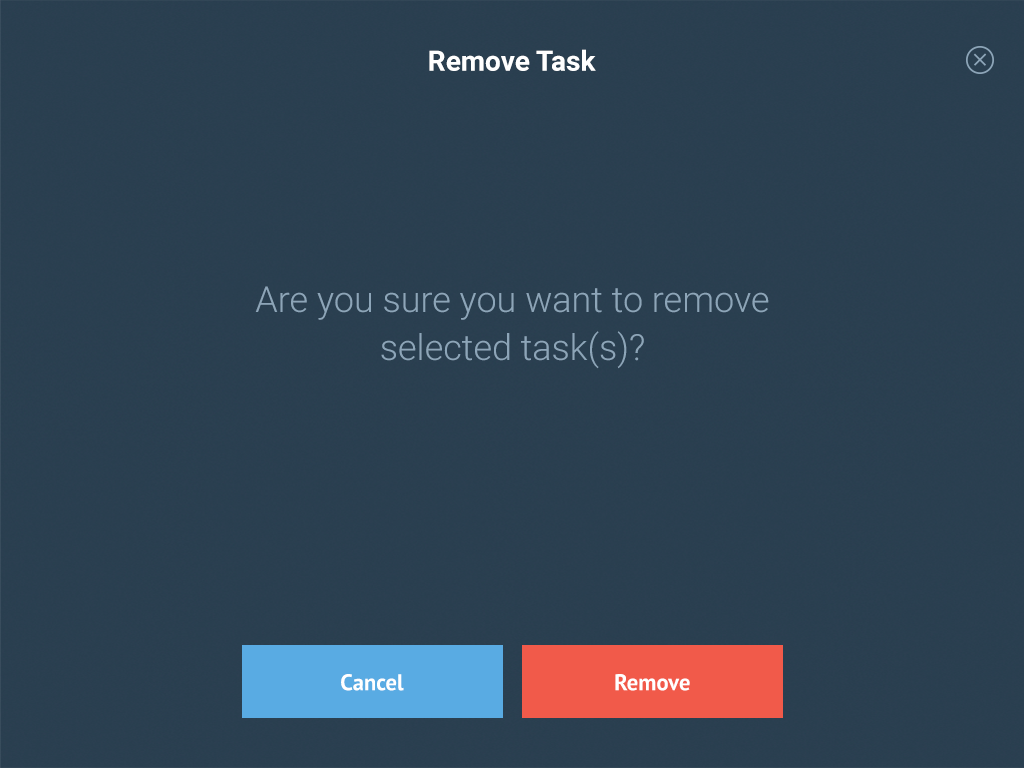
<style>
.page{position:relative;width:1024px;height:768px;background:#2a3f50}
.page>*{position:absolute;margin:0}
.t1{font:28px "Roboto-Bold";color:#ffffff}
.t2{font:36px/48px "Roboto-Light";color:#8da5b8}
.t3{font:22.6px "PTSans-Bold";color:#ffffff}
</style>
<div class="page">
<p class="t1" style="left:429px;top:49px;width:167px;height:22px">Remove Task</p>
<p class="t2" style="left:255px;top:286px;width:514px;height:83px;text-align:center">Are you sure you want to remove selected task(s)?</p>
<p class="t3" style="left:341px;top:674px;width:63px;height:17px">Cancel</p>
<p class="t3" style="left:615px;top:674px;width:75px;height:17px">Remove</p>
</div>
